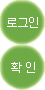
<style>
.page{position:relative;width:45px;height:90px;background:#6eaa45}
.page>*{position:absolute;margin:0}
.t1{font:12px "Dotum";letter-spacing:-0.12em;color:#ffffff}
.t2{font:12px "Dotum";letter-spacing:0.2em;color:#ffffff}
</style>
<div class="page">
<p class="t1" style="left:7px;top:17px;width:31px;height:11px">로그인</p>
<p class="t2" style="left:11px;top:62px;width:24px;height:11px">확인</p>
</div>
